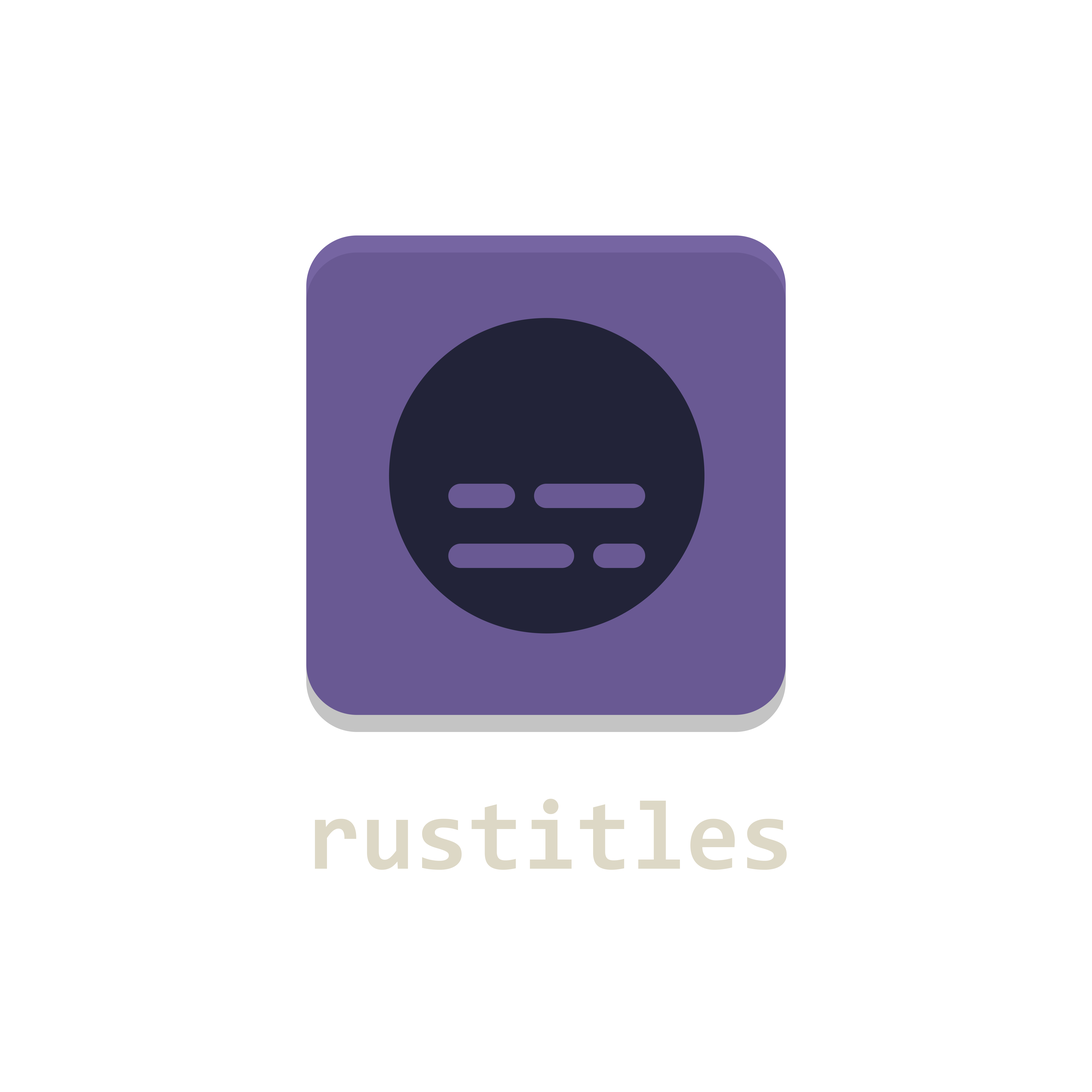
<style>
.page{position:relative;width:1092px;height:1092px;background:#ffffff}
.page>*{position:absolute;margin:0}
.t1{font:98.6px "Consolas-Bold";color:#ddd8c6}
</style>
<div class="page">
<p class="t1" style="left:315px;top:799px;width:472px;height:71px">rustitles</p>
</div>
